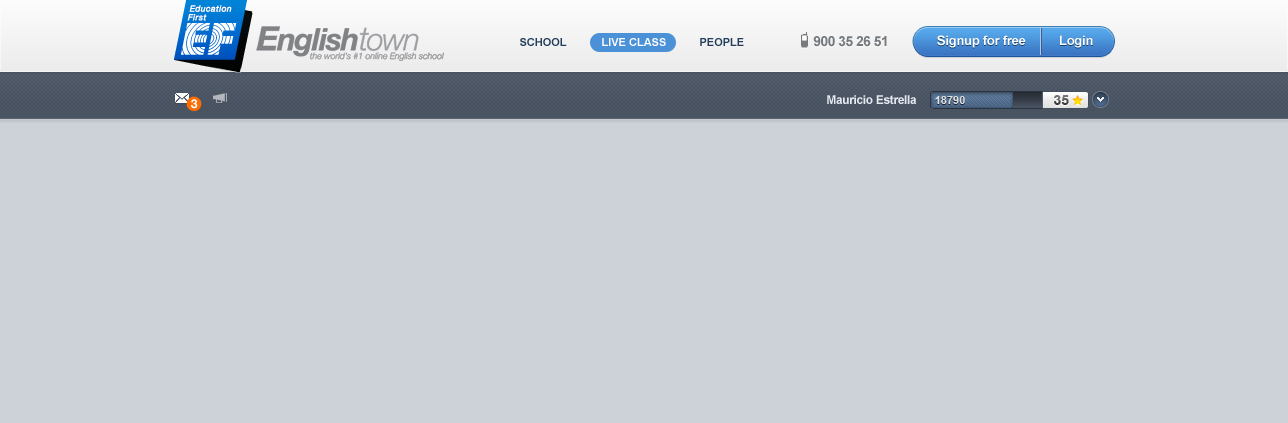
<style>
.page{position:relative;width:1288px;height:423px;background:#cdd2d8}
.page>*{position:absolute;margin:0}
.t1{font:11px "Arial-BoldMT";color:#233d5b;text-transform:uppercase}
.t2{font:11px "Arial-BoldMT";color:#ffffff;text-transform:uppercase}
.t3{font:14px "Arial-BoldMT";letter-spacing:-0.04em;color:#757a7f}
.t4{font:13px "Arial-BoldMT";letter-spacing:-0.02em;color:#ffffff}
.t5{font:12.2px "HelveticaNeue-Bold";letter-spacing:-0.02em;color:#ffffff}
.t6{font:12px "Arial-BoldMT";letter-spacing:-0.03em;color:#e4e8ef}
.t7{font:11px "Arial-BoldMT";color:#dadee0}
.t8{font:14px "Arial-BoldMT"}
</style>
<div class="page">
<p class="t1" style="left:520px;top:38px;width:47px;height:8px">School</p>
<p class="t2" style="left:602px;top:38px;width:64px;height:8px">Live Class</p>
<p class="t1" style="left:700px;top:38px;width:44px;height:8px">people</p>
<p class="t3" style="left:813px;top:36px;width:74px;height:11px">900 35 26 51</p>
<p class="t4" style="left:937px;top:35px;width:156px;height:13px">Signup for free          Login</p>
<p class="t5" style="left:191px;top:99px;width:7px;height:10px">3</p>
<p class="t6" style="left:827px;top:95px;width:90px;height:9px">Mauricio Estrella</p>
<p class="t7" style="left:935px;top:96px;width:30px;height:8px">18790</p>
<p class="t8" style="left:1054px;top:95px;width:15px;height:10px">35</p>
</div>
